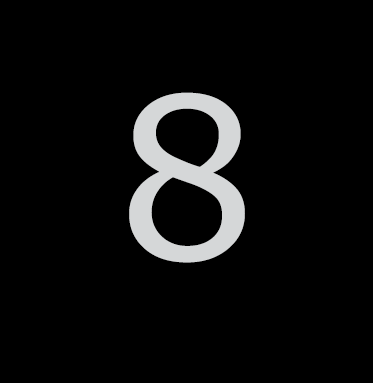
<style>
.page{position:relative;width:373px;height:383px;background:#000000}
.page>*{position:absolute;margin:0}
.t1{font:223.1px "Verdana";color:#d5d7d8}
</style>
<div class="page">
<p class="t1" style="left:129px;top:92px;width:116px;height:171px">8</p>
</div>
